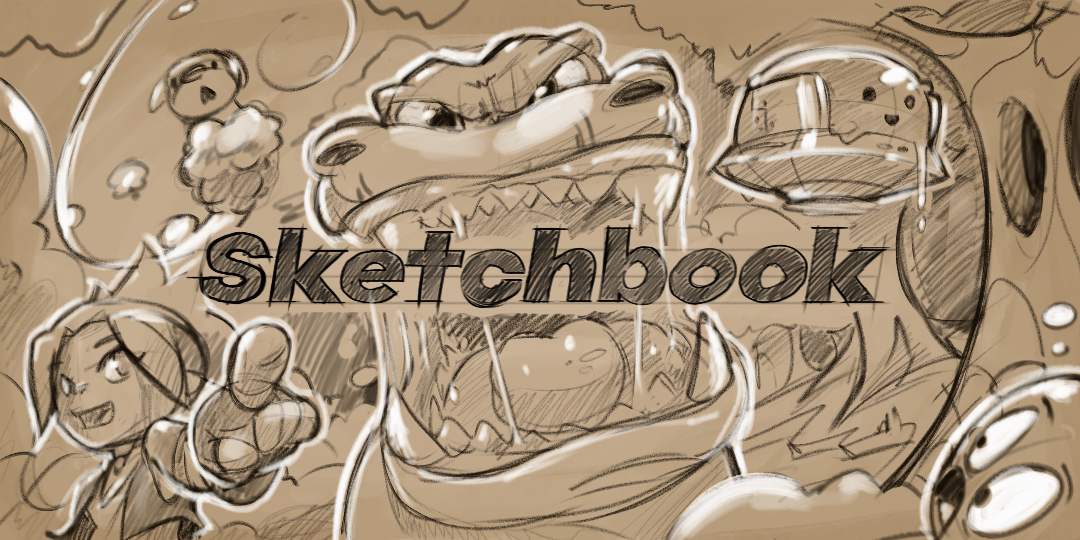
<style>
.page{position:relative;width:1080px;height:540px}
.page>*{position:absolute;margin:0}
.t1{font:98.6px "JumperPERSONALUSEONLY-Extra-BoldItalic"}
</style>
<div class="page">
<p class="t1" style="left:201px;top:228px;width:683px;height:76px">Sketchbook</p>
</div>
